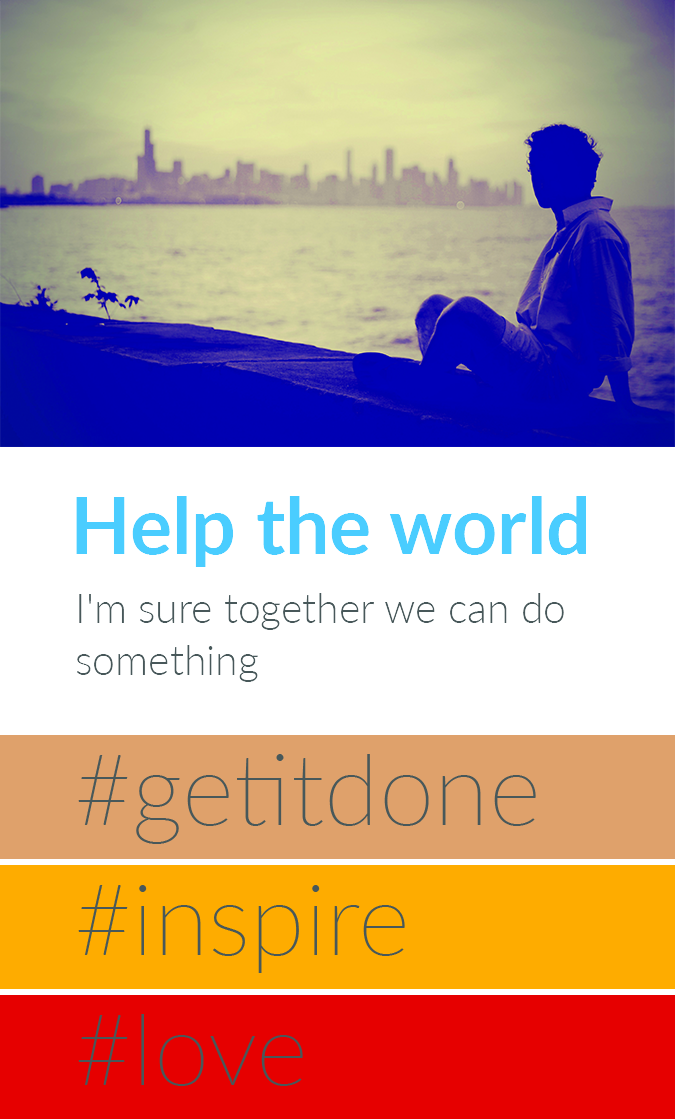
<style>
.page{position:relative;width:675px;height:1119px;background:#ffffff}
.page>*{position:absolute;margin:0}
.t1{font:79px "Lato-Bold";color:#4acdff}
.t2{font:41px/52px "Lato-Light";color:#48585a}
</style>
<div class="page">
<p class="t1" style="left:76px;top:496px;width:510px;height:71px">Help the world</p>
<p class="t2" style="left:76px;top:593px;width:488px;height:89px;text-align:right">I'm sure together we can do something</p>
</div>
